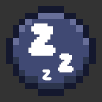
<style>
.page{position:relative;width:102px;height:102px;background:#333333}
.page>*{position:absolute;margin:0}
.t1{font:28.8px "Daydream";color:#ffffff}
.t2{font:16.7px "Daydream";color:#ffffff}
.t3{font:18.2px "KBCloudyDay";color:#ffffff}
</style>
<div class="page">
<p class="t1" style="left:28px;top:23px;width:28px;height:33px">z</p>
<p class="t2" style="left:58px;top:53px;width:16px;height:20px">z</p>
<p class="t3" style="left:42px;top:69px;width:10px;height:12px">z</p>
</div>
